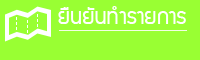
<style>
.page{position:relative;width:200px;height:60px;background:#99ff33}
.page>*{position:absolute;margin:0}
.t1{font:24px "supermarket";color:#ffffff}
</style>
<div class="page">
<p class="t1" style="left:58px;top:6px;width:128px;height:18px">ยืนยันทำรายการ</p>
</div>
